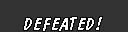
<style>
.page{position:relative;width:128px;height:32px;background:#333333}
.page>*{position:absolute;margin:0}
.t1{font:18px "DomDiagonalBT-Regular";letter-spacing:0.05em;color:#ffffff}
</style>
<div class="page">
<p class="t1" style="left:24px;top:17px;width:78px;height:14px">DEFEATED!</p>
</div>
